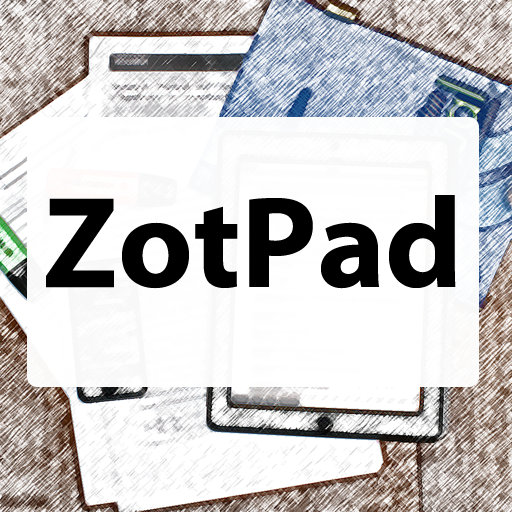
<style>
.page{position:relative;width:512px;height:512px;background:#ffffff}
.page>*{position:absolute;margin:0}
.t1{font:130px "MyriadPro-Bold";color:#000000}
</style>
<div class="page">
<p class="t1" style="left:46px;top:195px;width:410px;height:94px">ZotPad</p>
</div>
